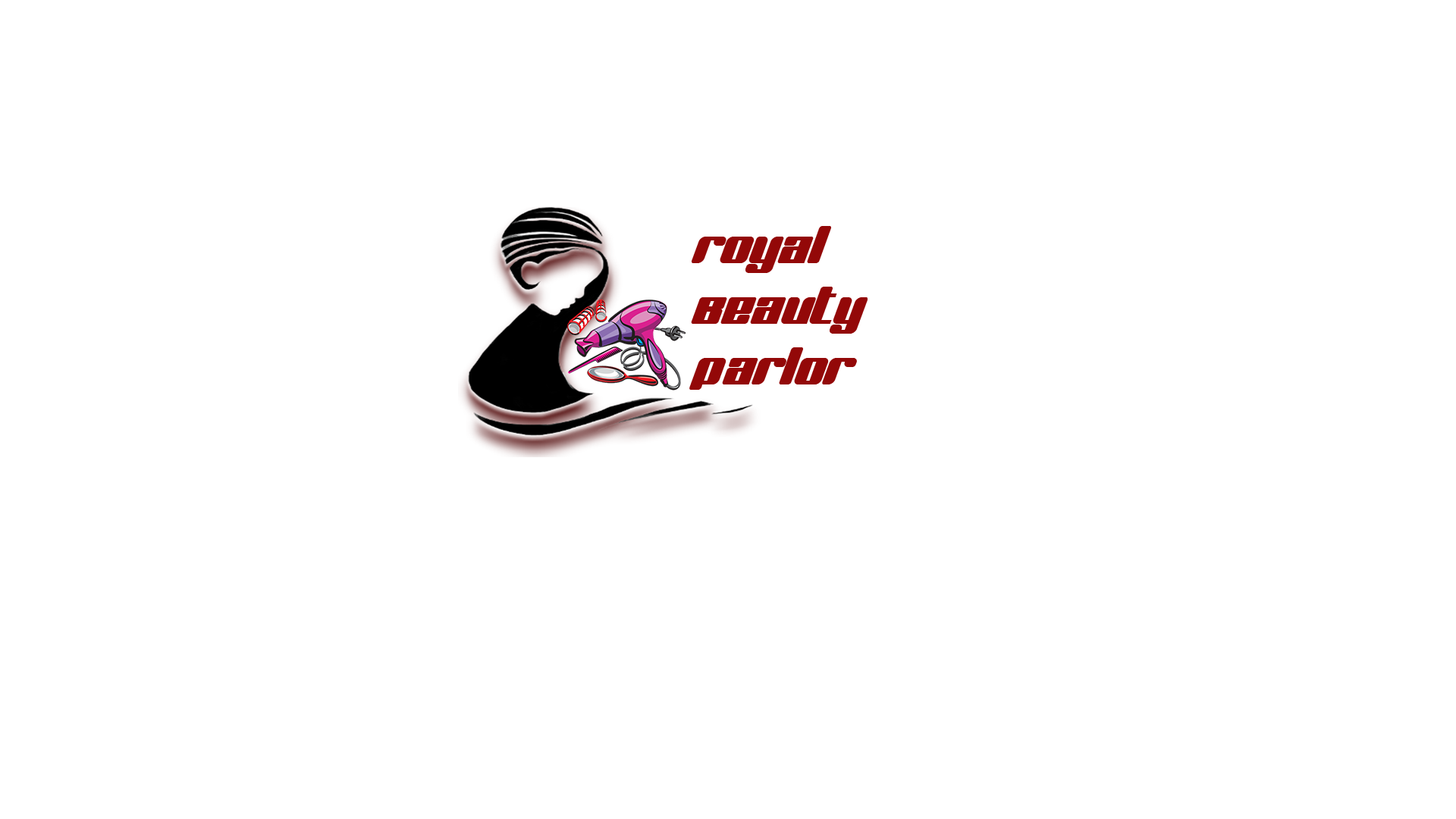
<style>
.page{position:relative;width:1456px;height:819px;background:#ffffff}
.page>*{position:absolute;margin:0}
.t1{font:50.6px "BNJinx";color:#930808}
</style>
<div class="page">
<p class="t1" style="left:689px;top:226px;width:179px;height:164px">Royal <br> Beauty<br> Parlor</p>
</div>
